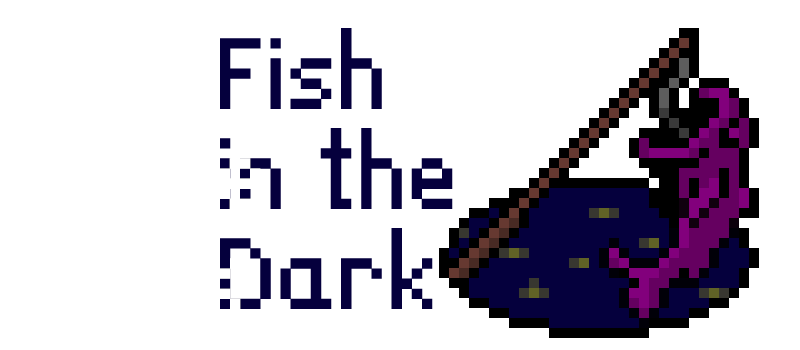
<style>
.page{position:relative;width:800px;height:350px;background:#ffffff}
.page>*{position:absolute;margin:0}
.t1{font:111px/100px "LanaPixel";color:#05003d}
</style>
<div class="page">
<p class="t1" style="left:220px;top:28px;width:233px;height:281px">Fish <br>in the<br>Dark</p>
</div>
